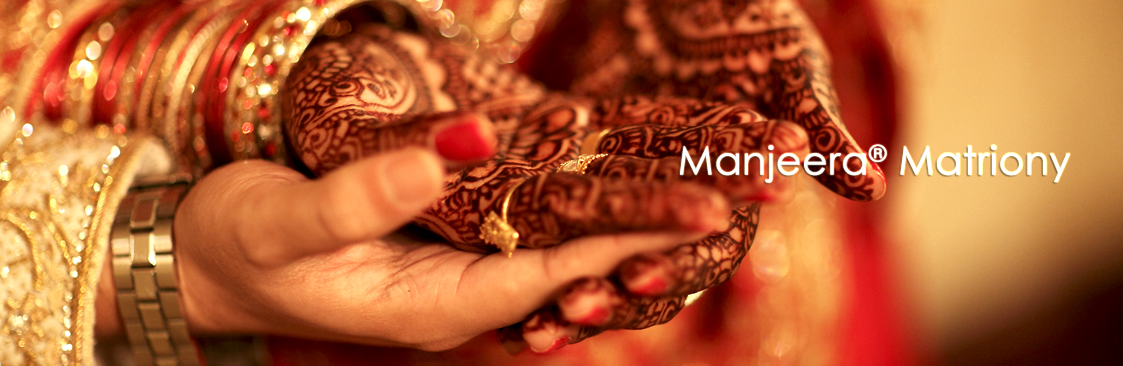
<style>
.page{position:relative;width:1123px;height:366px}
.page>*{position:absolute;margin:0}
.t1{font:38.9px "CenturyGothic";color:#ffffff;font-weight:bold}
</style>
<div class="page">
<p class="t1" style="left:679px;top:144px;width:391px;height:39px">Manjeera® Matriony</p>
</div>
